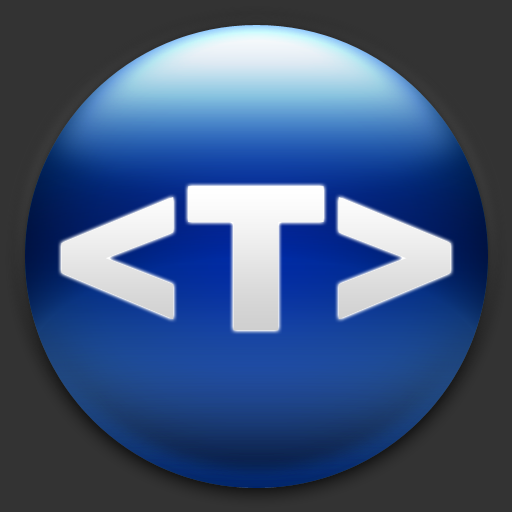
<style>
.page{position:relative;width:512px;height:512px;background:#333333}
.page>*{position:absolute;margin:0}
.t1{font:200.7px "Arial-Black";color:#ececec}
</style>
<div class="page">
<p class="t1" style="left:61px;top:186px;width:390px;height:145px">&lt;T&gt;</p>
</div>
